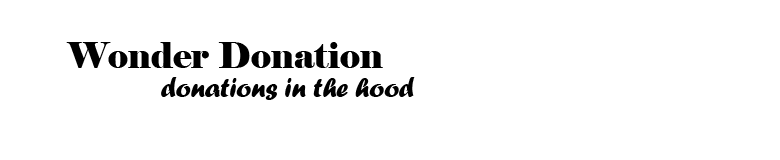
<style>
.page{position:relative;width:780px;height:160px;background:#ffffff}
.page>*{position:absolute;margin:0}
.t1{font:35px "Elephant-Regular";color:#000000}
.t2{font:27.5px "ForteMT";color:#000000}
</style>
<div class="page">
<p class="t1" style="left:66px;top:42px;width:317px;height:26px">Wonder Donation</p>
<p class="t2" style="left:161px;top:77px;width:254px;height:23px">donations in the hood</p>
</div>
